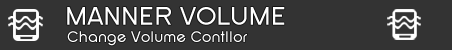
<style>
.page{position:relative;width:452px;height:50px;background:#333333}
.page>*{position:absolute;margin:0}
.t1{font:26.7px "SFNewRepublic";color:#ffffff}
.t2{font:16px "SFNewRepublic";color:#ffffff}
</style>
<div class="page">
<p class="t1" style="left:67px;top:7px;width:218px;height:18px">MANNER VOLUME</p>
<p class="t2" style="left:67px;top:31px;width:180px;height:15px">Change Volume Contllor</p>
</div>
